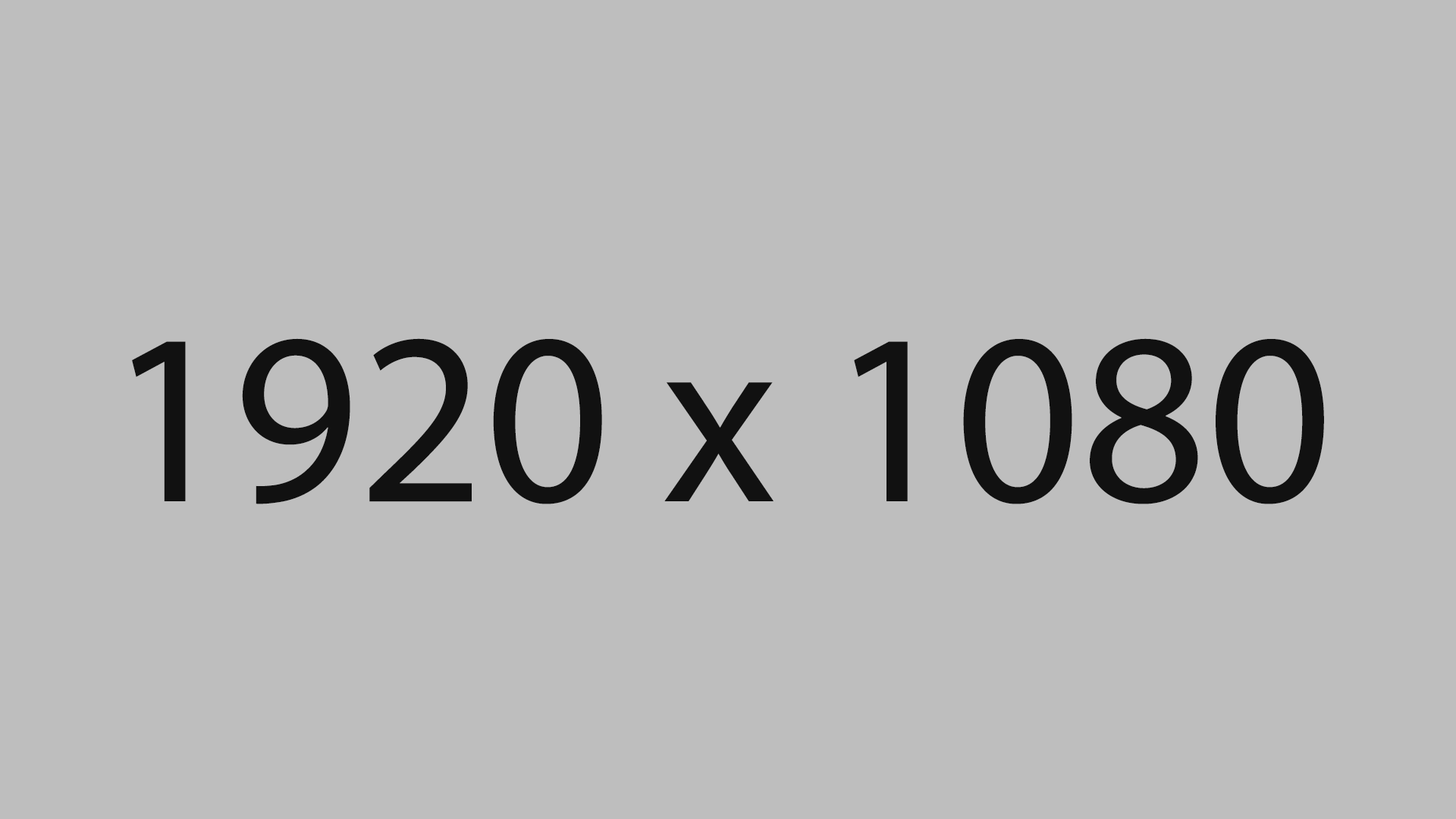
<style>
.page{position:relative;width:1456px;height:819px;background:#bebebe}
.page>*{position:absolute;margin:0}
.t1{font:245.7px "MyriadPro-Regular";color:#111111}
</style>
<div class="page">
<p class="t1" style="left:132px;top:338px;width:1192px;height:166px">1920 x 1080</p>
</div>
